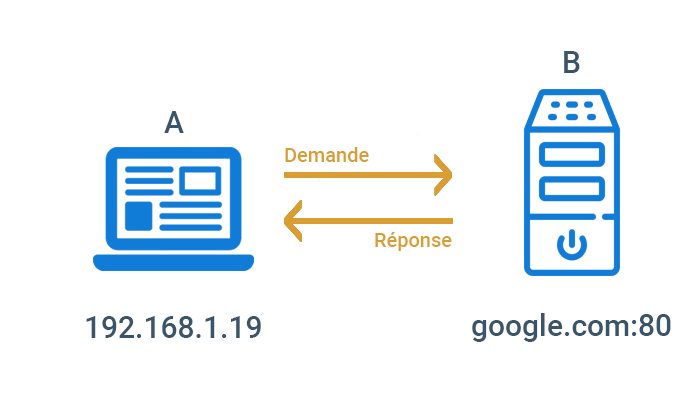
<style>
.page{position:relative;width:700px;height:400px;background:#ffffff}
.page>*{position:absolute;margin:0}
.t1{font:30px "Roboto-Medium";color:#3a556a}
.t2{font:20px "Roboto-Medium";color:#da9d32}
</style>
<div class="page">
<p class="t1" style="left:564px;top:51px;width:16px;height:22px">B</p>
<p class="t1" style="left:164px;top:111px;width:20px;height:22px">A</p>
<p class="t2" style="left:285px;top:147px;width:84px;height:15px">Demande</p>
<p class="t2" style="left:375px;top:232px;width:77px;height:19px">Réponse</p>
<p class="t1" style="left:86px;top:316px;width:175px;height:22px">192.168.1.19</p>
<p class="t1" style="left:472px;top:313px;width:199px;height:29px">google.com:80</p>
</div>
